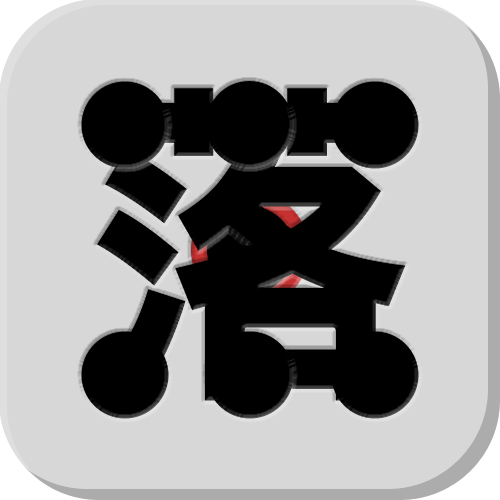
<style>
.page{position:relative;width:500px;height:500px;background:#d7d7d7}
.page>*{position:absolute;margin:0}
.t1{font:333.3px "KoreanGD19-R";color:#000000}
</style>
<div class="page">
<p class="t1" style="left:95px;top:88px;width:311px;height:318px">落</p>
</div>
